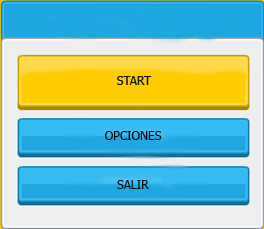
<style>
.page{position:relative;width:264px;height:229px;background:#eeeeee}
.page>*{position:absolute;margin:0}
.t1{font:12px "Tahoma";color:#020202}
</style>
<div class="page">
<p class="t1" style="left:105px;top:131px;width:57px;height:9px">OPCIONES</p>
<p class="t1" style="left:117px;top:180px;width:32px;height:9px">SALIR</p>
</div>
